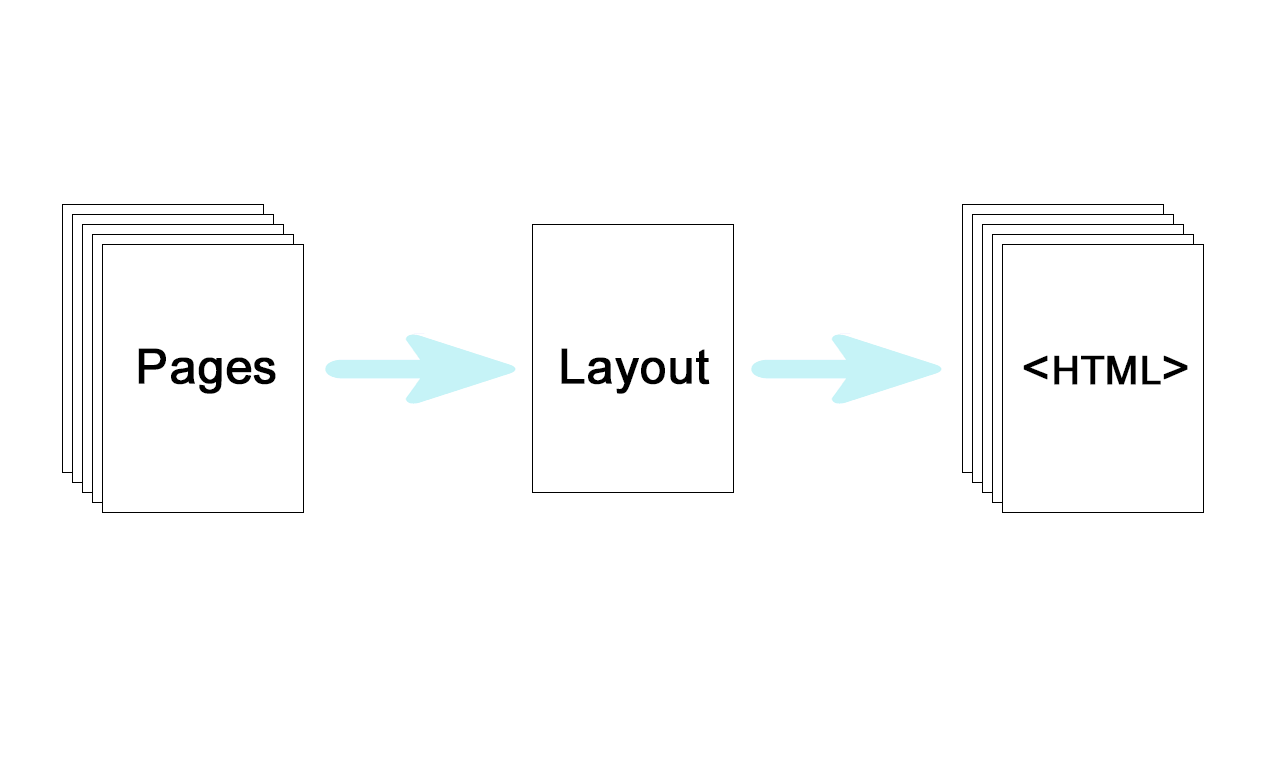
<style>
.page{position:relative;width:1280px;height:768px;background:#ffffff}
.page>*{position:absolute;margin:0}
.t1{font:48px "ArialMT";color:#000000;font-weight:bold}
.t2{font:56px "ArialMT";color:#000000;font-variant:small-caps;font-weight:bold}
.t3{font:48px "ArialMT";color:#000000;font-variant:small-caps;font-weight:bold}
</style>
<div class="page">
<p class="t1" style="left:138px;top:348px;width:138px;height:46px">Pages</p>
<p class="t1" style="left:561px;top:348px;width:149px;height:46px">Layout</p>
<p class="t2" style="left:1023px;top:355px;width:165px;height:30px"><span class="t3">&lt;</span>html<span class="t3">&gt;</span></p>
</div>
